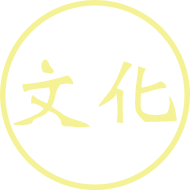
<style>
.page{position:relative;width:190px;height:190px;background:#ffffff}
.page>*{position:absolute;margin:0}
.t1{font:83.3px "Weibei-TC-Bold";color:#f5f296;scale:1.08 1}
</style>
<div class="page">
<p class="t1" style="left:13px;top:59px;width:164px;height:69px">文化</p>
</div>
